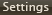
<style>
.page{position:relative;width:52px;height:15px}
.page>*{position:absolute;margin:0}
.t1{font:12px "LucidaSansUnicode";color:#e4dccf}
</style>
<div class="page">
<p class="t1" style="left:3px;top:2px;width:46px;height:11px">Settings</p>
</div>
